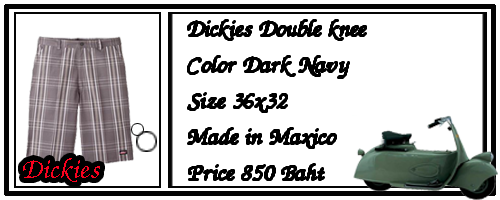
<style>
.page{position:relative;width:500px;height:200px;background:#ffffff}
.page>*{position:absolute;margin:0}
.t1{font:30px "DSUMonTaNa";color:#060606}
.t2{font:36px "DSUMonTaNa";color:#f9011e}
</style>
<div class="page">
<p class="t1" style="left:188px;top:20px;width:178px;height:160px">Dickies Double knee<br>Color Dark Navy<br>Size 36x32<br>Made in Maxico<br>Price 850 Baht</p>
<p class="t2" style="left:23px;top:158px;width:77px;height:24px">Dickies</p>
</div>
